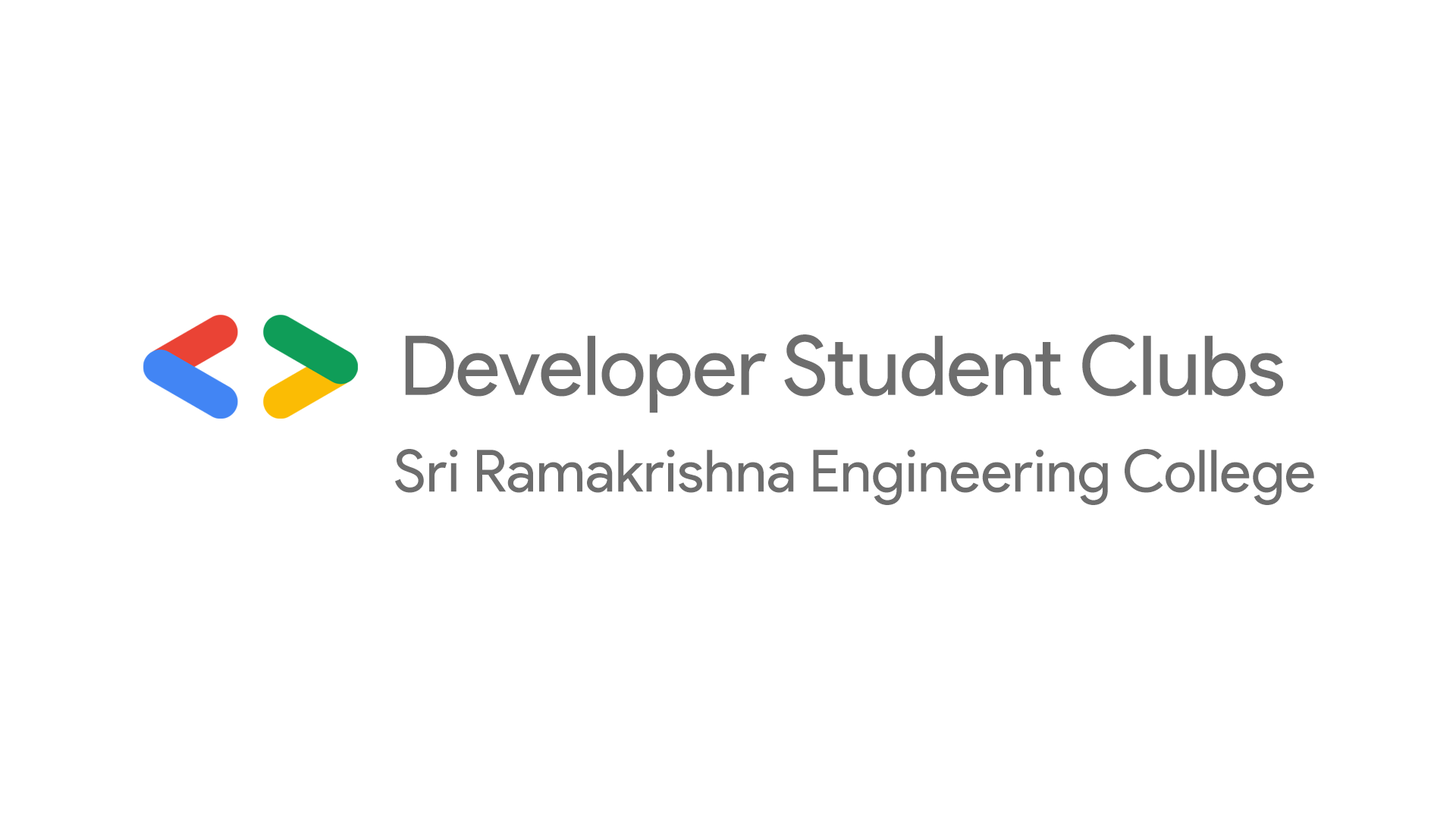
<style>
.page{position:relative;width:1456px;height:819px;background:#ffffff}
.page>*{position:absolute;margin:0}
.t1{font:82.5px "ProductSans-Regular";color:#6d6d6d}
.t2{font:58.3px "ProductSans-Regular";color:#6d6d6d}
</style>
<div class="page">
<p class="t1" style="left:405px;top:334px;width:878px;height:79px">Developer Student Clubs</p>
<p class="t2" style="left:395px;top:449px;width:919px;height:56px">Sri Ramakrishna Engineering College</p>
</div>
